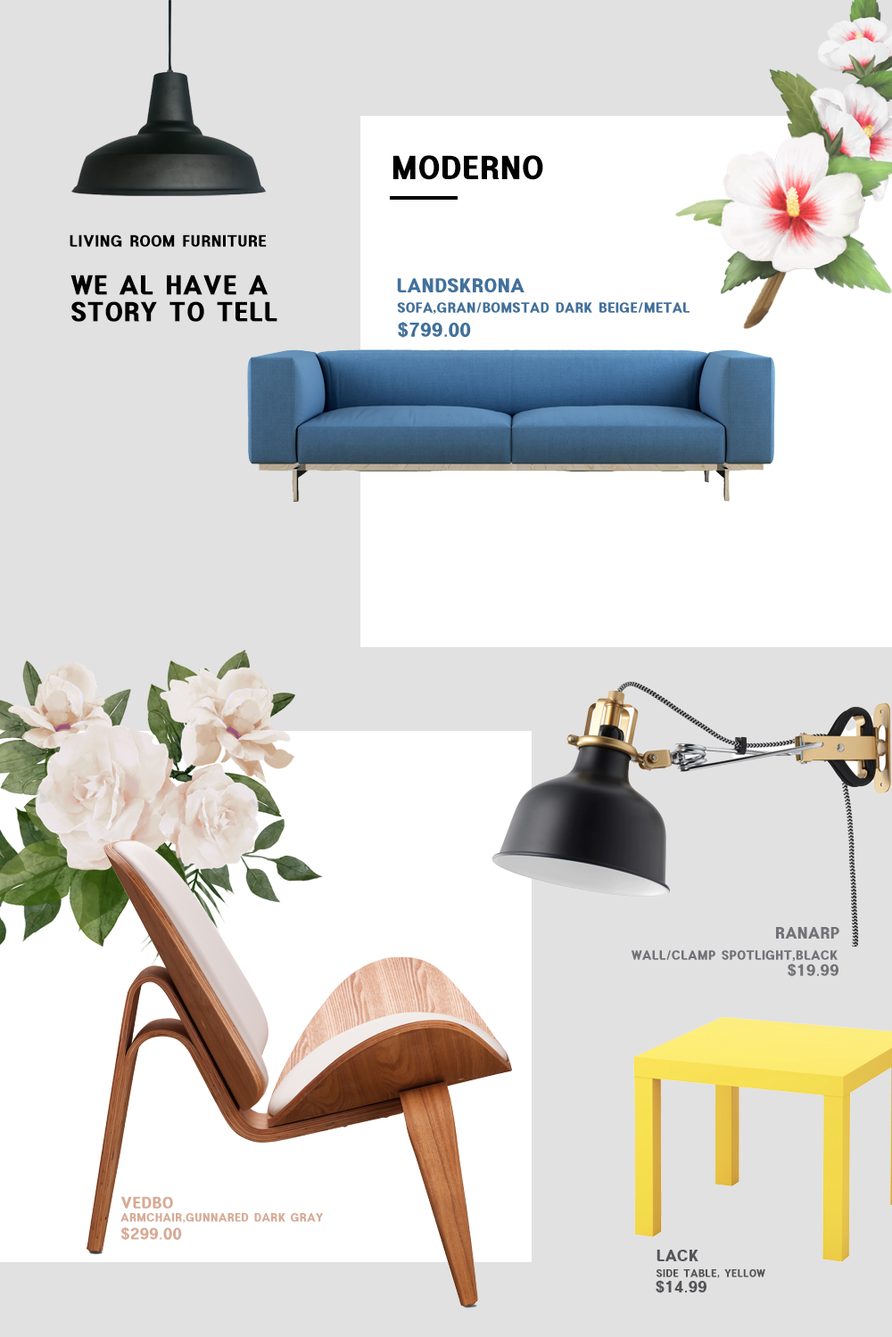
<style>
.page{position:relative;width:892px;height:1337px;background:#e1e1e1}
.page>*{position:absolute;margin:0}
.t1{font:26.7px "HeadlineR-HM";color:#000000}
.t2{font:13.4px "HeadlineR-HM";color:#000000}
.t3{font:22.3px "HeadlineR-HM";color:#000000}
.t4{font:16px "HeadlineR-HM";color:#42719c}
.t5{font:11.6px "HeadlineR-HM";color:#42719c}
.t6{font:13.4px "HeadlineR-HM";color:#737277}
.t7{font:10.7px "HeadlineR-HM";color:#737277}
.t8{font:13.4px "HeadlineR-HM";color:#d7ab96}
.t9{font:9.8px "HeadlineR-HM";color:#d7ab96}
.t10{font:13.4px "HeadlineR-HM";color:#555458}
.t11{font:8.9px "HeadlineR-HM";color:#555458}
</style>
<div class="page">
<p class="t1" style="left:392px;top:155px;width:151px;height:25px">MODERNO</p>
<p class="t2" style="left:70px;top:234px;width:197px;height:13px">LIVING ROOM FURNITURE</p>
<p class="t3" style="left:70px;top:275px;width:207px;height:47px">WE AL HAVE A<br>STORY TO TELL</p>
<p class="t4" style="left:397px;top:278px;width:127px;height:14px">LANDSKRONA</p>
<p class="t5" style="left:397px;top:302px;width:292px;height:12px">SOFA,GRAN/BOMSTAD DARK BEIGE/METAL</p>
<p class="t4" style="left:398px;top:322px;width:73px;height:16px">$799.00</p>
<p class="t6" style="left:776px;top:927px;width:63px;height:12px">RANARP</p>
<p class="t7" style="left:630px;top:950px;width:207px;height:12px">WALL/CLAMP SPOTLIGHT,BLACK</p>
<p class="t6" style="left:787px;top:964px;width:51px;height:13px">$19.99</p>
<p class="t8" style="left:120px;top:1197px;width:53px;height:12px">VEDBO</p>
<p class="t9" style="left:120px;top:1213px;width:204px;height:10px">ARMCHAIR,GUNNARED DARK GRAY</p>
<p class="t8" style="left:120px;top:1228px;width:62px;height:12px">$299.00</p>
<p class="t10" style="left:656px;top:1250px;width:42px;height:12px">LACK</p>
<p class="t11" style="left:656px;top:1270px;width:109px;height:9px">SIDE TABLE, YELLOW</p>
<p class="t10" style="left:655px;top:1280px;width:51px;height:14px">$14.99</p>
</div>
